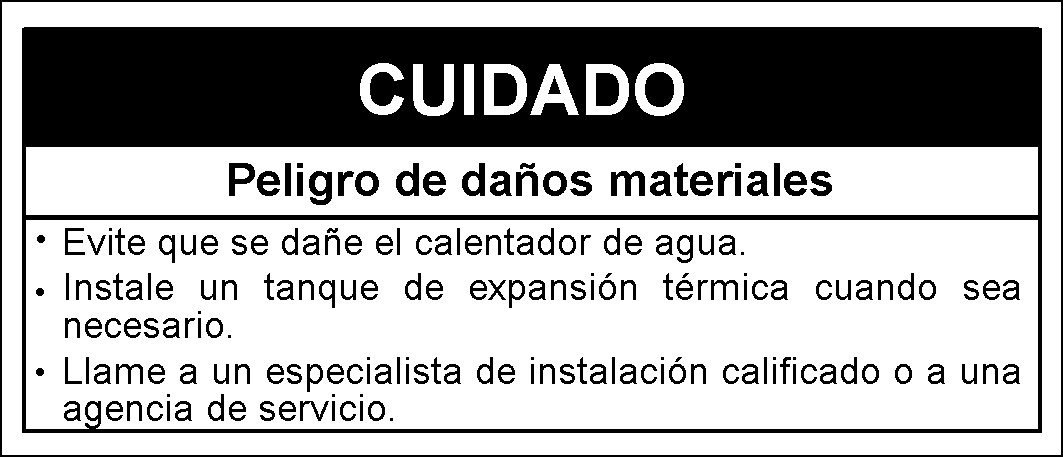
<style>
.page{position:relative;width:1063px;height:457px;background:#ffffff}
.page>*{position:absolute;margin:0}
.t1{font:70.8px "Arial-BoldMT";color:#fefefe}
.t2{font:45.8px "Arial-BoldMT";color:#000000}
.t3{font:37.5px/37.5px "ArialMT";color:#000000}
.t4{font:33.3px "ArialMT";color:#000000}
</style>
<div class="page">
<p class="t1" style="left:360px;top:63px;width:324px;height:53px">CUIDADO</p>
<p class="t2" style="left:229px;top:163px;width:603px;height:42px">Peligro de daños materiales</p>
<p class="t3" style="left:64px;top:228px;width:956px;height:201px;text-align:justify">Evite que se dañe el calentador de agua.<br>Instale un tanque de expansión térmica cuando sea necesario.<br>Llame a un especialista de instalación calificado o a una agencia  de servicio.</p>
<p class="t4" style="left:37px;top:235px;width:8px;height:8px">•</p>
<p class="t4" style="left:36px;top:288px;width:8px;height:8px">•</p>
<p class="t4" style="left:36px;top:368px;width:8px;height:8px">•</p>
</div>
